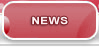
<style>
.page{position:relative;width:99px;height:48px}
.page>*{position:absolute;margin:0}
.t1{font:10.3px "Arial-BoldMT";letter-spacing:0.025em;color:#ffffff;scale:1.16 1}
</style>
<div class="page">
<p class="t1" style="left:32px;top:16px;width:36px;height:9px">NEWS</p>
</div>
